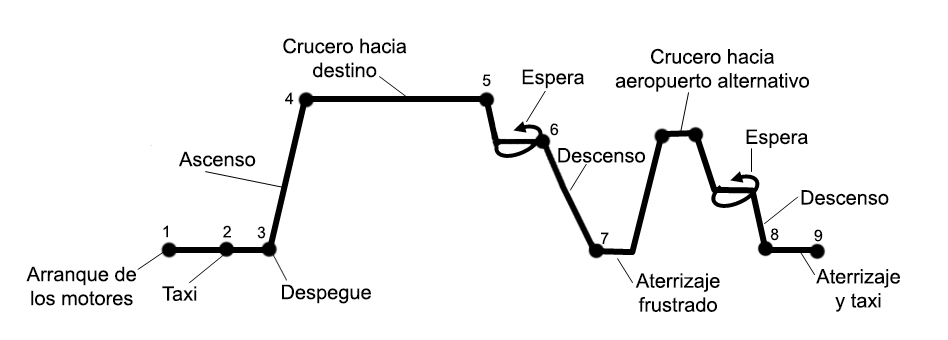
<style>
.page{position:relative;width:948px;height:340px;background:#ffffff}
.page>*{position:absolute;margin:0}
.t1{font:20px "ArialMT";color:#000000}
.t2{font:16px "ArialMT";color:#000000}
</style>
<div class="page">
<p class="t1" style="left:283px;top:38px;width:124px;height:40px;text-align:center">Crucero hacia<br>destino</p>
<p class="t1" style="left:615px;top:48px;width:194px;height:44px;text-align:center">Crucero hacia<br>aeropuerto alternativo</p>
<p class="t2" style="left:482px;top:74px;width:9px;height:13px">5</p>
<p class="t1" style="left:522px;top:69px;width:62px;height:20px">Espera</p>
<p class="t2" style="left:285px;top:92px;width:9px;height:13px">4</p>
<p class="t2" style="left:550px;top:123px;width:9px;height:13px">6</p>
<p class="t1" style="left:746px;top:129px;width:62px;height:19px">Espera</p>
<p class="t1" style="left:558px;top:148px;width:87px;height:15px">Descenso</p>
<p class="t1" style="left:179px;top:151px;width:77px;height:16px">Ascenso</p>
<p class="t1" style="left:801px;top:190px;width:88px;height:15px">Descenso</p>
<p class="t2" style="left:163px;top:225px;width:5px;height:13px">1</p>
<p class="t2" style="left:223px;top:225px;width:8px;height:13px">2</p>
<p class="t2" style="left:257px;top:226px;width:9px;height:13px">3</p>
<p class="t2" style="left:601px;top:232px;width:8px;height:12px">7</p>
<p class="t2" style="left:770px;top:228px;width:9px;height:13px">8</p>
<p class="t2" style="left:814px;top:229px;width:9px;height:13px">9</p>
<p class="t1" style="left:26px;top:266px;width:110px;height:40px;text-align:center">Arranque de<br>los motores</p>
<p class="t1" style="left:816px;top:269px;width:84px;height:43px;text-align:center">Aterrizaje<br>y taxi</p>
<p class="t1" style="left:635px;top:273px;width:85px;height:39px;text-align:center">Aterrizaje<br>frustrado</p>
<p class="t1" style="left:162px;top:286px;width:35px;height:15px">Taxi</p>
<p class="t1" style="left:282px;top:284px;width:89px;height:20px">Despegue</p>
</div>
